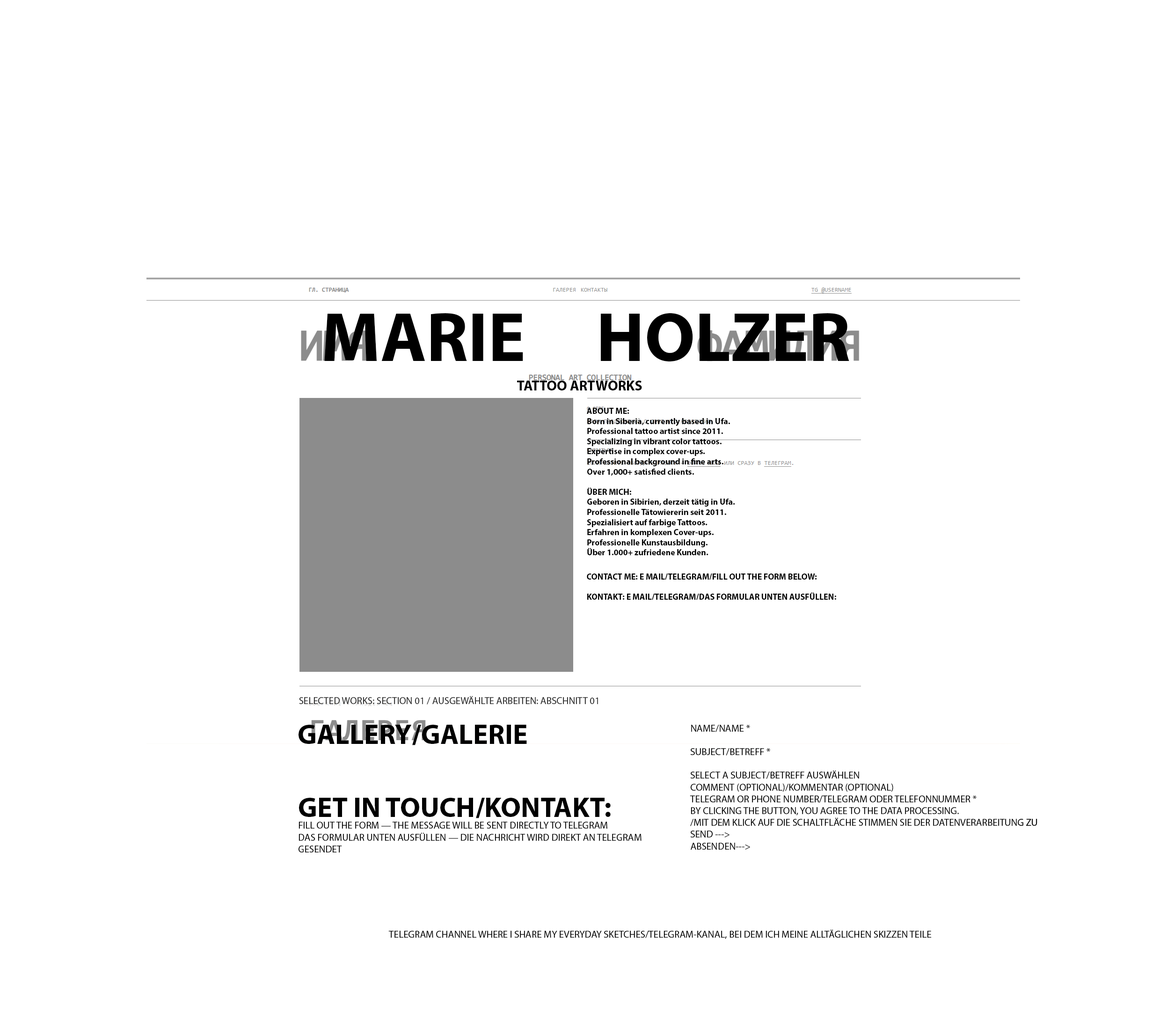
<style>
.page{position:relative;width:1167px;height:1022px;background:#ffffff}
.page>*{position:absolute;margin:0}
.t1{font:70.2px "MyriadPro-Bold";color:#000000}
.t2{font:14px "MyriadPro-Bold";color:#000000}
.t3{font:8.4px "MyriadPro-Bold";color:#000000}
.t4{font:9.8px "MyriadPro-Regular";color:#252525}
.t5{font:28.1px "MyriadPro-Bold";color:#000000}
.t6{font:9.8px "MyriadPro-Regular";color:#000000}
</style>
<div class="page">
<p class="t1" style="left:324px;top:313px;width:525px;height:49px">MARIE     HOLZER</p>
<p class="t2" style="left:517px;top:380px;width:125px;height:10px">TATTOO ARTWORKS</p>
<p class="t3" style="left:587px;top:408px;width:148px;height:147px">ABOUT ME:<br>Born in Siberia, currently based in Ufa.<br>Professional tattoo artist since 2011.<br>Specializing in vibrant color tattoos.<br>Expertise in complex cover-ups.<br>Professional background in fine arts.<br>Over 1,000+ satisfied clients.<br><br>ÜBER MICH:<br>Geboren in Sibirien, derzeit tätig in Ufa.<br>Professionelle Tätowiererin seit 2011. <br>Spezialisiert auf farbige Tattoos.<br>Erfahren in komplexen Cover-ups.<br>Professionelle Kunstausbildung.<br>Über 1.000+ zufriedene Kunden.</p>
<p class="t3" style="left:587px;top:573px;width:249px;height:27px">CONTACT ME: E MAIL/TELEGRAM/FILL OUT THE FORM BELOW:<br><br>KONTAKT: E MAIL/TELEGRAM/DAS FORMULAR UNTEN AUSFÜLLEN:</p>
<p class="t4" style="left:299px;top:695px;width:299px;height:9px">SELECTED WORKS: SECTION 01 / AUSGEWÄHLTE ARBEITEN: ABSCHNITT 01</p>
<p class="t5" style="left:299px;top:724px;width:228px;height:21px">GALLERY/GALERIE</p>
<p class="t6" style="left:690px;top:724px;width:348px;height:125px">NAME/NAME *<br><br>SUBJECT/BETREFF *<br><br>SELECT A SUBJECT/BETREFF AUSWÄHLEN<br>COMMENT (OPTIONAL)/KOMMENTAR (OPTIONAL)<br>TELEGRAM OR PHONE NUMBER/TELEGRAM ODER TELEFONNUMMER *<br>BY CLICKING THE BUTTON, YOU AGREE TO THE DATA PROCESSING.<br>/MIT DEM KLICK AUF DIE SCHALTFLÄCHE STIMMEN SIE DER DATENVERARBEITUNG ZU<br>SEND ---&gt;<br>ABSENDEN---&gt;</p>
<p class="t6" style="left:298px;top:797px;width:344px;height:55px"><span class="t5">GET IN TOUCH/KONTAKT: <br></span>FILL OUT THE FORM — THE MESSAGE WILL BE SENT DIRECTLY TO TELEGRAM<br>DAS FORMULAR UNTEN AUSFÜLLEN — DIE NACHRICHT WIRD DIREKT AN TELEGRAM<br>GESENDET</p>
<p class="t6" style="left:388px;top:929px;width:544px;height:10px">TELEGRAM CHANNEL WHERE I SHARE MY EVERYDAY SKETCHES/TELEGRAM-KANAL, ВЕI DEM ICH MEINE ALLTÄGLICHEN SKIZZEN TEILE</p>
</div>
